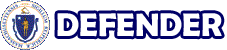
<style>
.page{position:relative;width:227px;height:50px;background:#ffffff}
.page>*{position:absolute;margin:0}
.t1{font:32.9px "BerlinSansFBDemi-Bold";color:#ffffff}
</style>
<div class="page">
<p class="t1" style="left:57px;top:13px;width:165px;height:24px">DEFENDER</p>
</div>
